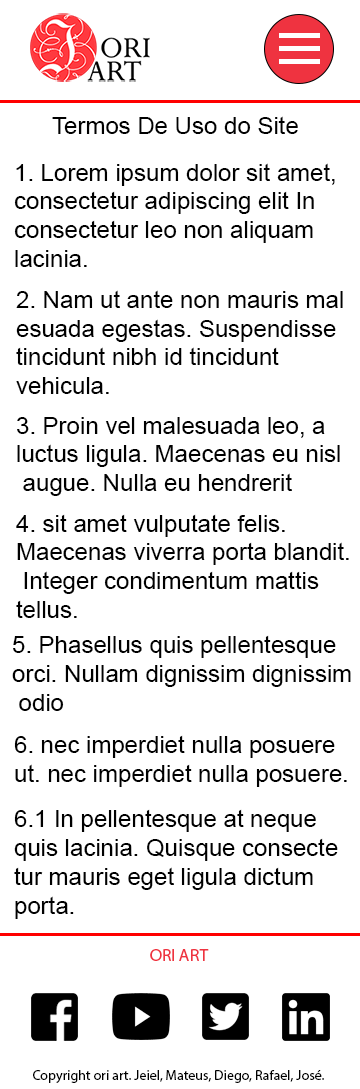
<style>
.page{position:relative;width:360px;height:1089px;background:#ffffff}
.page>*{position:absolute;margin:0}
.t1{font:24px "ArialMT";color:#000000}
</style>
<div class="page">
<p class="t1" style="left:52px;top:116px;width:246px;height:18px">Termos De Uso do Site</p>
<p class="t1" style="left:14px;top:163px;width:321px;height:104px">1. Lorem ipsum dolor sit amet, <br>consectetur adipiscing elit In <br>consectetur leo non aliquam <br>lacinia.</p>
<p class="t1" style="left:16px;top:290px;width:327px;height:104px">2. Nam ut ante non mauris mal<br>esuada egestas. Suspendisse <br>tincidunt nibh id tincidunt <br>vehicula.</p>
<p class="t1" style="left:17px;top:417px;width:323px;height:79px">3. Proin vel malesuada leo, a <br>luctus ligula. Maecenas eu nisl<br> augue. Nulla eu hendrerit</p>
<p class="t1" style="left:16px;top:514px;width:333px;height:104px">4. sit amet vulputate felis. <br>Maecenas viverra porta blandit.<br> Integer condimentum mattis <br>tellus.</p>
<p class="t1" style="left:12px;top:635px;width:339px;height:76px">5. Phasellus quis pellentesque <br>orci. Nullam dignissim dignissim<br> odio</p>
<p class="t1" style="left:14px;top:735px;width:333px;height:52px">6. nec imperdiet nulla posuere <br>ut. nec imperdiet nulla posuere.</p>
<p class="t1" style="left:14px;top:809px;width:324px;height:110px">6.1 In pellentesque at neque <br>quis lacinia. Quisque consecte<br>tur mauris eget ligula dictum <br>porta.</p>
</div>
